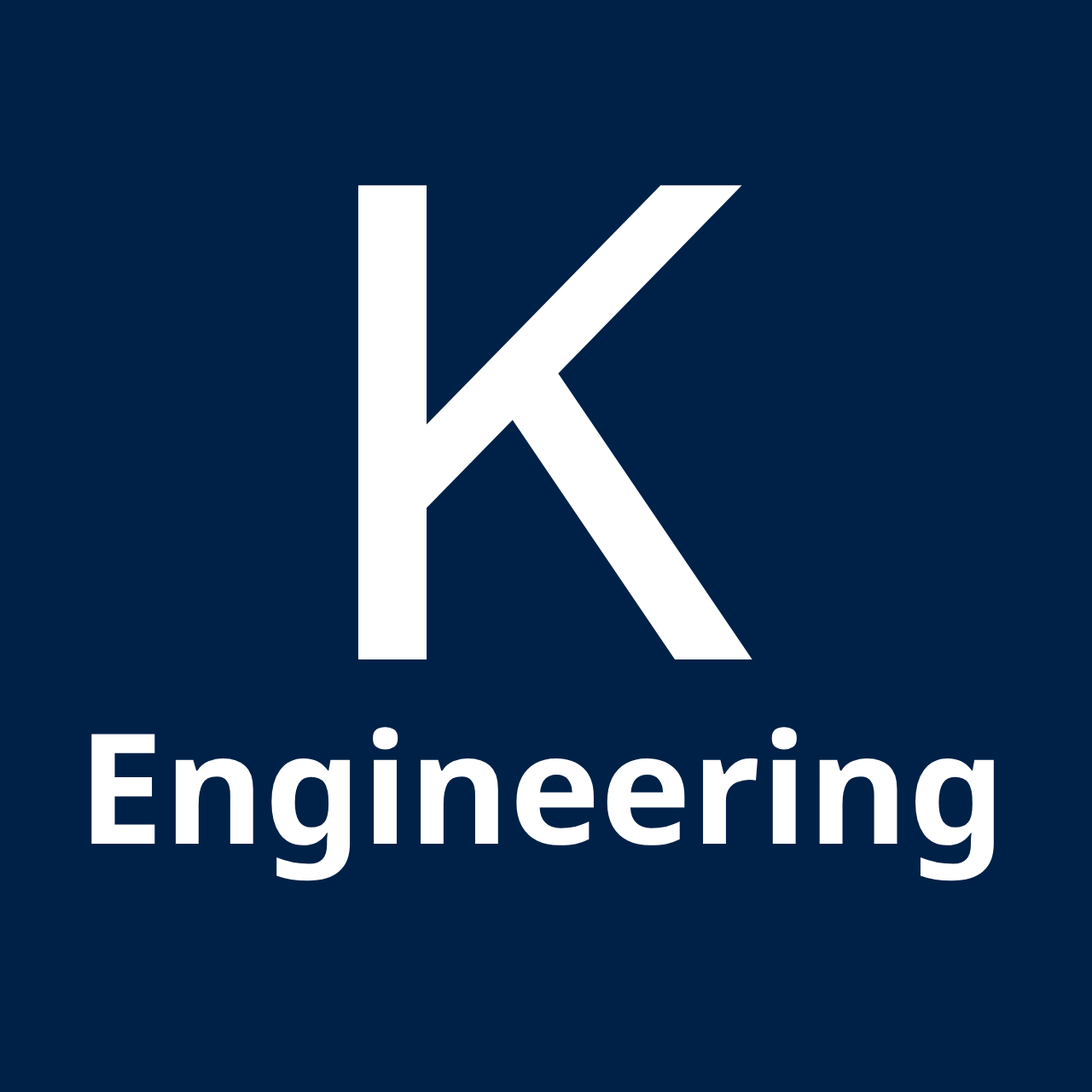
<style>
.page{position:relative;width:1092px;height:1092px;background:#002147}
.page>*{position:absolute;margin:0}
.t1{font:153.6px "NotoSans-Bold";color:#ffffff}
.t2{font:682.5px "CMUBright-SemiBold";color:#ffffff}
</style>
<div class="page">
<p class="t1" style="left:91px;top:185px;width:903px;height:696px;text-align:center"><span class="t2">K<br></span>Engineering</p>
</div>
